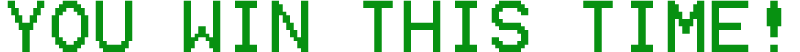
<style>
.page{position:relative;width:800px;height:52px;background:#ffffff}
.page>*{position:absolute;margin:0}
.t1{font:58.7px "Terminal";color:#079111}
</style>
<div class="page">
<p class="t1" style="left:7px;top:0px;width:775px;height:52px">YOU WIN THIS TIME!</p>
</div>
